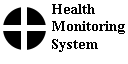
<style>
.page{position:relative;width:128px;height:64px;background:#ffffff}
.page>*{position:absolute;margin:0}
.t1{font:14.6px "TimesNewRomanPS-BoldMT";color:#010101}
</style>
<div class="page">
<p class="t1" style="left:52px;top:4px;width:73px;height:48px">Health<br>Monitoring<br>System</p>
</div>
